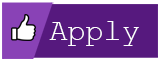
<style>
.page{position:relative;width:160px;height:60px;background:#56197e}
.page>*{position:absolute;margin:0}
.t1{font:30.3px "CourierNewPSMT";color:#ffffff}
</style>
<div class="page">
<p class="t1" style="left:49px;top:21px;width:90px;height:25px">Apply</p>
</div>
